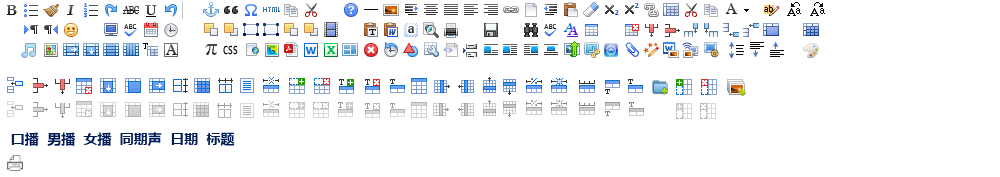
<style>
.page{position:relative;width:1000px;height:177px;background:#ffffff}
.page>*{position:absolute;margin:0}
.t1{font:14px "MicrosoftYaHei-Bold";color:#001c58}
</style>
<div class="page">
<p class="t1" style="left:11px;top:132px;width:224px;height:14px">口播  男播  女播  同期声  日期  标题</p>
</div>
